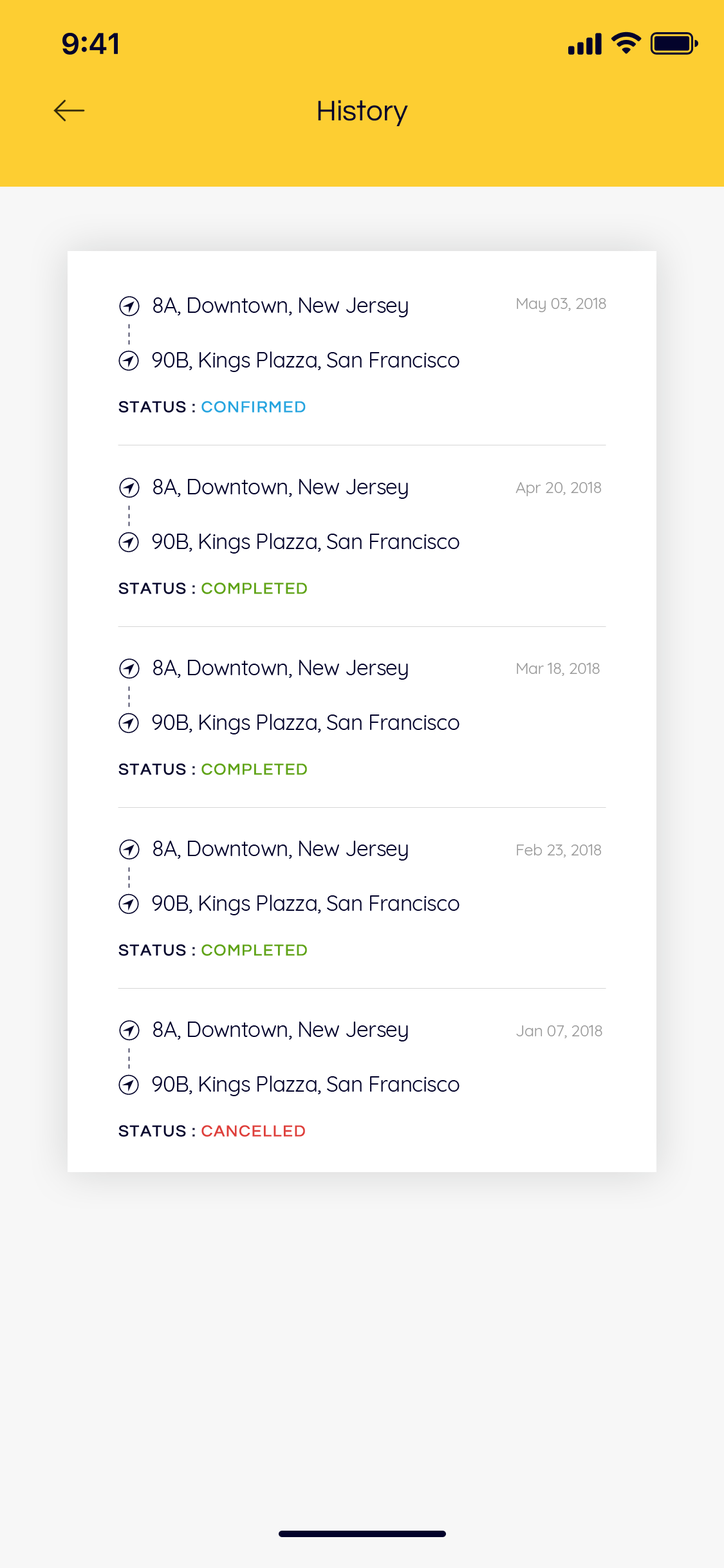
<style>
.page{position:relative;width:724px;height:1568px;background:#ffffff}
.page>*{position:absolute;margin:0}
.t1{font:29.5px "Questrial-Regular";color:#03032b}
.t2{font:21.5px "Quicksand-Regular";letter-spacing:-0.02em;color:#03032b}
.t3{font:16.1px "Quicksand-Regular";letter-spacing:-0.02em;color:#999999}
.t4{font:16.1px "Quicksand-Light";letter-spacing:0.12em;color:#03032b}
.t5{font:16.1px "Questrial-Regular";letter-spacing:0.06em;color:#26a4df;text-transform:uppercase;font-weight:bold}
.t6{font:16.1px "Questrial-Regular";letter-spacing:0.06em;color:#03032b;text-transform:uppercase;font-weight:bold}
.t7{font:16.1px "Questrial-Regular";letter-spacing:0.06em;color:#5fa317;text-transform:uppercase;font-weight:bold}
.t8{font:16.1px "Questrial-Regular";letter-spacing:0.06em;color:#de3e3a;text-transform:uppercase;font-weight:bold}
</style>
<div class="page">
<p class="t1" style="left:318px;top:100px;width:90px;height:26px">History</p>
<p class="t2" style="left:153px;top:297px;width:255px;height:20px">8A, Downtown, New Jersey</p>
<p class="t3" style="left:517px;top:297px;width:89px;height:15px">May 03, 2018</p>
<p class="t4" style="left:128px;top:324px;width:2px;height:21px;rotate:90deg">---</p>
<p class="t2" style="left:152px;top:351px;width:308px;height:21px">90B, Kings Plazza, San Francisco</p>
<p class="t5" style="left:118px;top:401px;width:188px;height:12px"><span class="t6">STATUS : </span>CONFIRMED</p>
<p class="t2" style="left:153px;top:479px;width:255px;height:20px">8A, Downtown, New Jersey</p>
<p class="t3" style="left:516px;top:481px;width:85px;height:15px">Apr 20, 2018</p>
<p class="t4" style="left:128px;top:505px;width:2px;height:22px;rotate:90deg">---</p>
<p class="t2" style="left:152px;top:533px;width:308px;height:21px">90B, Kings Plazza, San Francisco</p>
<p class="t7" style="left:118px;top:583px;width:189px;height:11px"><span class="t6">STATUS : </span>COMPleted</p>
<p class="t2" style="left:153px;top:660px;width:255px;height:20px">8A, Downtown, New Jersey</p>
<p class="t3" style="left:517px;top:662px;width:83px;height:14px">Mar 18, 2018</p>
<p class="t4" style="left:128px;top:686px;width:2px;height:21px;rotate:90deg">---</p>
<p class="t2" style="left:152px;top:714px;width:308px;height:20px">90B, Kings Plazza, San Francisco</p>
<p class="t7" style="left:118px;top:763px;width:189px;height:12px"><span class="t6">STATUS : </span>COMPleted</p>
<p class="t2" style="left:153px;top:841px;width:255px;height:20px">8A, Downtown, New Jersey</p>
<p class="t3" style="left:517px;top:844px;width:84px;height:13px">Feb 23, 2018</p>
<p class="t4" style="left:128px;top:867px;width:2px;height:21px;rotate:90deg">---</p>
<p class="t2" style="left:152px;top:895px;width:308px;height:20px">90B, Kings Plazza, San Francisco</p>
<p class="t7" style="left:118px;top:944px;width:189px;height:12px"><span class="t6">STATUS : </span>COMPleted</p>
<p class="t2" style="left:153px;top:1022px;width:255px;height:19px">8A, Downtown, New Jersey</p>
<p class="t3" style="left:516px;top:1025px;width:86px;height:13px">Jan 07, 2018</p>
<p class="t4" style="left:128px;top:1048px;width:2px;height:21px;rotate:90deg">---</p>
<p class="t2" style="left:152px;top:1076px;width:308px;height:20px">90B, Kings Plazza, San Francisco</p>
<p class="t8" style="left:118px;top:1125px;width:187px;height:12px"><span class="t6">STATUS : </span>CANCELLED</p>
</div>
